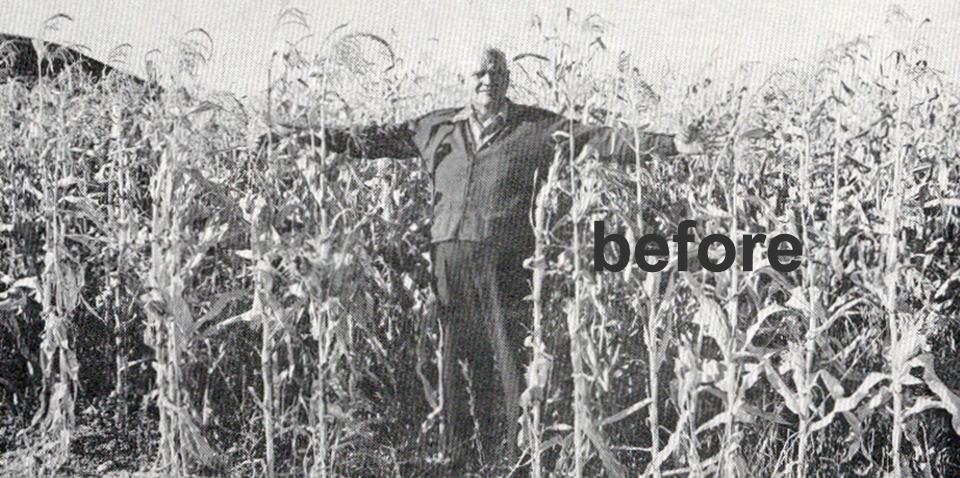
<style>
.page{position:relative;width:960px;height:478px}
.page>*{position:absolute;margin:0}
.t1{font:70.5px "Arial-BoldMT";color:#333333}
</style>
<div class="page">
<p class="t1" style="left:594px;top:219px;width:209px;height:54px">before</p>
</div>
